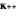
<style>
.page{position:relative;width:16px;height:16px;background:#ffffff}
.page>*{position:absolute;margin:0}
.t1{font:8px "CooperBlack";color:#000000}
</style>
<div class="page">
<p class="t1" style="left:0px;top:3px;width:16px;height:7px">K++</p>
</div>
